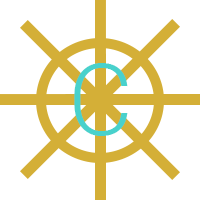
<style>
.page{position:relative;width:200px;height:200px;background:#ffffff}
.page>*{position:absolute;margin:0}
.t1{font:100px "Roboto-Light";color:#48d1cc}
</style>
<div class="page">
<p class="t1" style="left:74px;top:63px;width:54px;height:73px">C</p>
</div>
